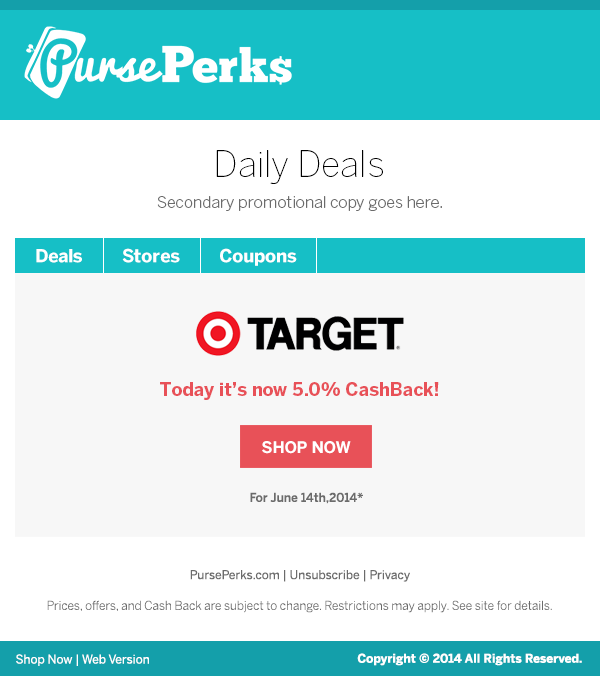
<style>
.page{position:relative;width:600px;height:676px;background:#ffffff}
.page>*{position:absolute;margin:0}
.t1{font:36px "BentonSans-Thin";color:#000000}
.t2{font:16px "BentonSans-Light";color:#6b6b6b}
.t3{font:18px "BentonSans-Bold";color:#ffffff}
.t4{font:18px "BentonSans-Bold";color:#e85158}
.t5{font:16px "BentonSans-Bold";color:#ffffff;text-transform:uppercase}
.t6{font:12px "BentonSans-Medium";color:#6b6b6b}
.t7{font:12px "BentonSans-Regular";color:#6b6b6b}
.t8{font:12px "BentonSans-Light";color:#6b6b6b}
.t9{font:12px "BentonSans-Regular";color:#ffffff}
.t10{font:12px "BentonSans-Bold";color:#ffffff}
</style>
<div class="page">
<p class="t1" style="left:216px;top:150px;width:167px;height:34px">Daily Deals</p>
<p class="t2" style="left:157px;top:196px;width:285px;height:15px">Secondary promotional copy goes here.</p>
<p class="t3" style="left:36px;top:249px;width:46px;height:14px">Deals</p>
<p class="t3" style="left:122px;top:248px;width:58px;height:15px">Stores</p>
<p class="t3" style="left:220px;top:248px;width:77px;height:18px">Coupons</p>
<p class="t4" style="left:160px;top:382px;width:279px;height:18px">Today it’s now 5.0% CashBack!</p>
<p class="t5" style="left:262px;top:441px;width:89px;height:13px">Shop Now</p>
<p class="t6" style="left:250px;top:492px;width:113px;height:12px">For June 14th,2014*</p>
<p class="t7" style="left:190px;top:570px;width:220px;height:12px">PursePerks.com | Unsubscribe | Privacy</p>
<p class="t8" style="left:47px;top:600px;width:505px;height:13px">Prices, offers, and Cash Back are subject to change. Restrictions may apply. See site for details.</p>
<p class="t9" style="left:16px;top:654px;width:133px;height:12px">Shop Now | Web Version</p>
<p class="t10" style="left:357px;top:653px;width:225px;height:13px">Copyright © 2014 All Rights Reserved.</p>
</div>
